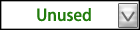
<style>
.page{position:relative;width:140px;height:30px;background:#ffffff}
.page>*{position:absolute;margin:0}
.t1{font:12px "AdobeHeitiStd-Regular";color:#227c0d}
</style>
<div class="page">
<p class="t1" style="left:37px;top:8px;width:54px;height:14px">Unused</p>
</div>
